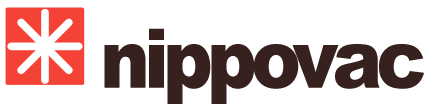
<style>
.page{position:relative;width:440px;height:105px;background:#ffffff}
.page>*{position:absolute;margin:0}
.t1{font:82.5px "Arial-Black";letter-spacing:-0.08em;color:#37211f;scale:0.91 1}
</style>
<div class="page">
<p class="t1" style="left:104px;top:28px;width:320px;height:76px">nippovac</p>
</div>
